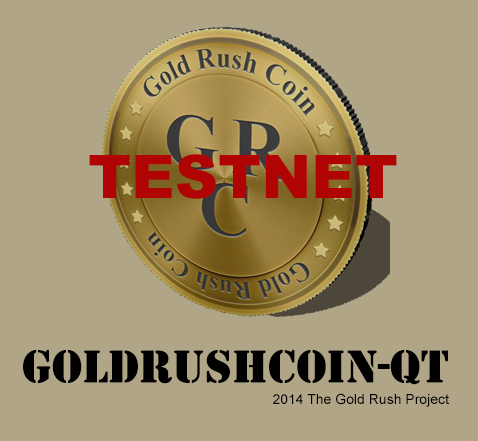
<style>
.page{position:relative;width:478px;height:441px;background:#b0a587}
.page>*{position:absolute;margin:0}
.t1{font:60px "Arial-Black";color:#b00303}
.t2{font:48px "Stencil";color:#010000}
.t3{font:14px "ArialMT";color:#000000}
</style>
<div class="page">
<p class="t1" style="left:89px;top:154px;width:308px;height:45px">TESTNET</p>
<p class="t2" style="left:23px;top:349px;width:425px;height:36px">GoldRushcoin-QT</p>
<p class="t3" style="left:273px;top:393px;width:176px;height:14px">2014 The Gold Rush Project</p>
</div>
